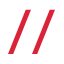
<style>
.page{position:relative;width:64px;height:64px;background:#ffffff}
.page>*{position:absolute;margin:0}
.t1{font:51px "SourceSansPro-BlackIt";letter-spacing:0.14em;color:#da2339}
</style>
<div class="page">
<p class="t1" style="left:8px;top:9px;width:47px;height:45px">//</p>
</div>
